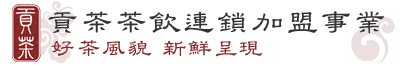
<style>
.page{position:relative;width:400px;height:65px;background:#ffffff}
.page>*{position:absolute;margin:0}
.t1{font:33.3px "DFKuoTaiBeiStd-W4";letter-spacing:0.025em;color:#333333}
.t2{font:25px "DFKuoTaiBeiStd-W4";letter-spacing:0.025em;color:#8a2827}
</style>
<div class="page">
<p class="t1" style="left:48px;top:11px;width:337px;height:23px">貢茶茶飲連鎖加盟事業</p>
<p class="t2" style="left:51px;top:40px;width:212px;height:17px">好茶風貌 新鮮呈現</p>
</div>
